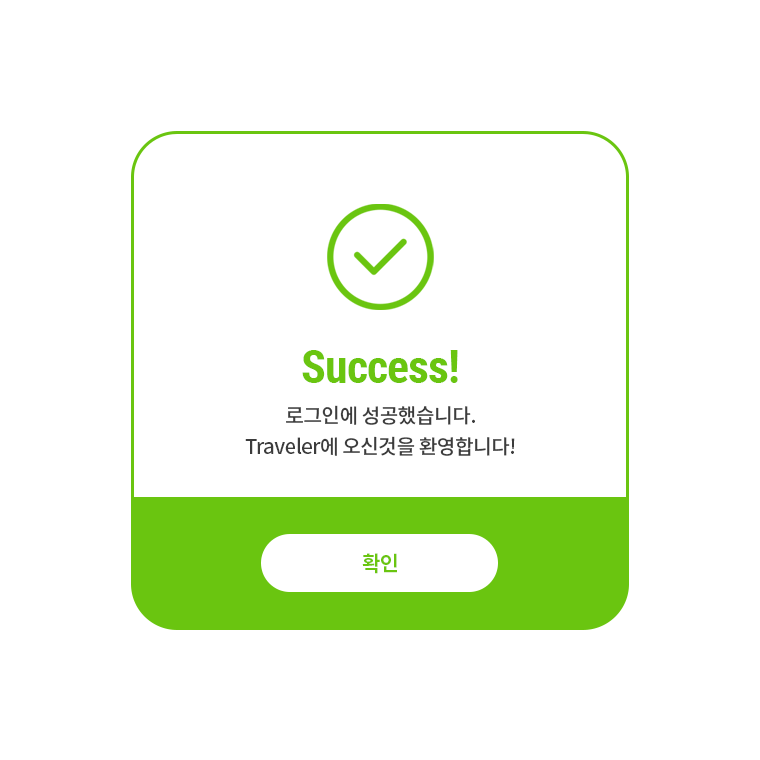
<style>
.page{position:relative;width:760px;height:760px;background:#ffffff}
.page>*{position:absolute;margin:0}
.t1{font:46.4px "RobotoCondensed-Bold";letter-spacing:-0.025em;color:#6ac510}
.t2{font:20.3px/31.9px "NotoSansKR-Medium";letter-spacing:-0.025em;color:#3c3c3c}
.t3{font:20.3px "NotoSansKR-Bold";letter-spacing:-0.025em;color:#6ac510}
</style>
<div class="page">
<p class="t1" style="left:302px;top:350px;width:156px;height:33px">Success!</p>
<p class="t2" style="left:245px;top:405px;width:270px;height:51px;text-align:center">로그인에 성공했습니다.<br>Traveler에 오신것을 환영합니다!</p>
<p class="t3" style="left:362px;top:553px;width:35px;height:21px">확인</p>
</div>
